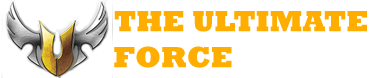
<style>
.page{position:relative;width:375px;height:78px;background:#ffffff}
.page>*{position:absolute;margin:0}
.t1{font:30px "Rockwell-ExtraBold";color:#ffae00}
</style>
<div class="page">
<p class="t1" style="left:114px;top:11px;width:253px;height:57px;text-align:right">THE ULTIMATE<br>FORCE</p>
</div>
